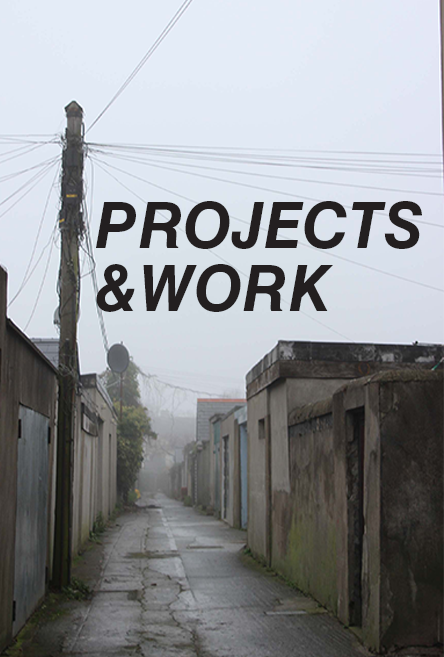
<style>
.page{position:relative;width:444px;height:657px}
.page>*{position:absolute;margin:0}
.t1{font:63.5px/62.5px "HelveticaLTStd-BoldObl";color:#231f20}
</style>
<div class="page">
<p class="t1" style="left:96px;top:201px;width:326px;height:111px">PROJECTS<br>&amp;WORK</p>
</div>
